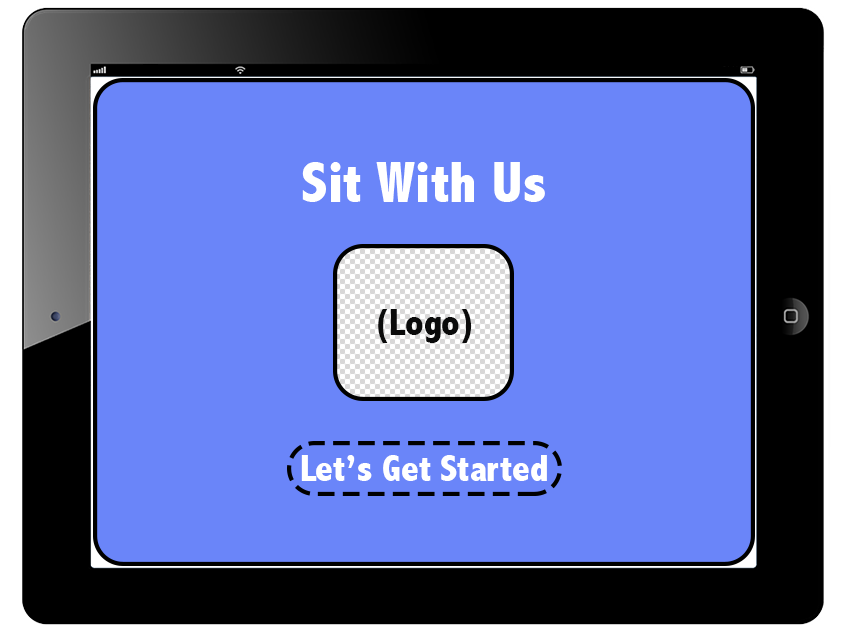
<style>
.page{position:relative;width:850px;height:637px;background:#6a85f9}
.page>*{position:absolute;margin:0}
.t1{font:58.3px "AbadiMT-CondensedExtraBold";color:#ffffff}
.t2{font:37.5px "AbadiMT-CondensedExtraBold";color:#0b0b0b}
.t3{font:37.5px "AbadiMT-CondensedExtraBold";color:#ffffff}
</style>
<div class="page">
<p class="t1" style="left:302px;top:162px;width:243px;height:40px">Sit With Us</p>
<p class="t2" style="left:378px;top:309px;width:94px;height:34px">(Logo)</p>
<p class="t3" style="left:301px;top:455px;width:246px;height:26px">Let’s Get Started</p>
</div>
